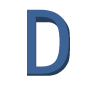
<style>
.page{position:relative;width:94px;height:85px;background:#ffffff}
.page>*{position:absolute;margin:0}
.t1{font:87.7px "DINAlternate-Bold";color:#3c6296}
.t2{font:87.7px "Menlo-Regular";color:#3c6296}
</style>
<div class="page">
<p class="t1" style="left:27px;top:13px;width:43px;height:63px">D</p>
<p class="t2" style="left:27px;top:9px;width:42px;height:65px">D</p>
</div>
